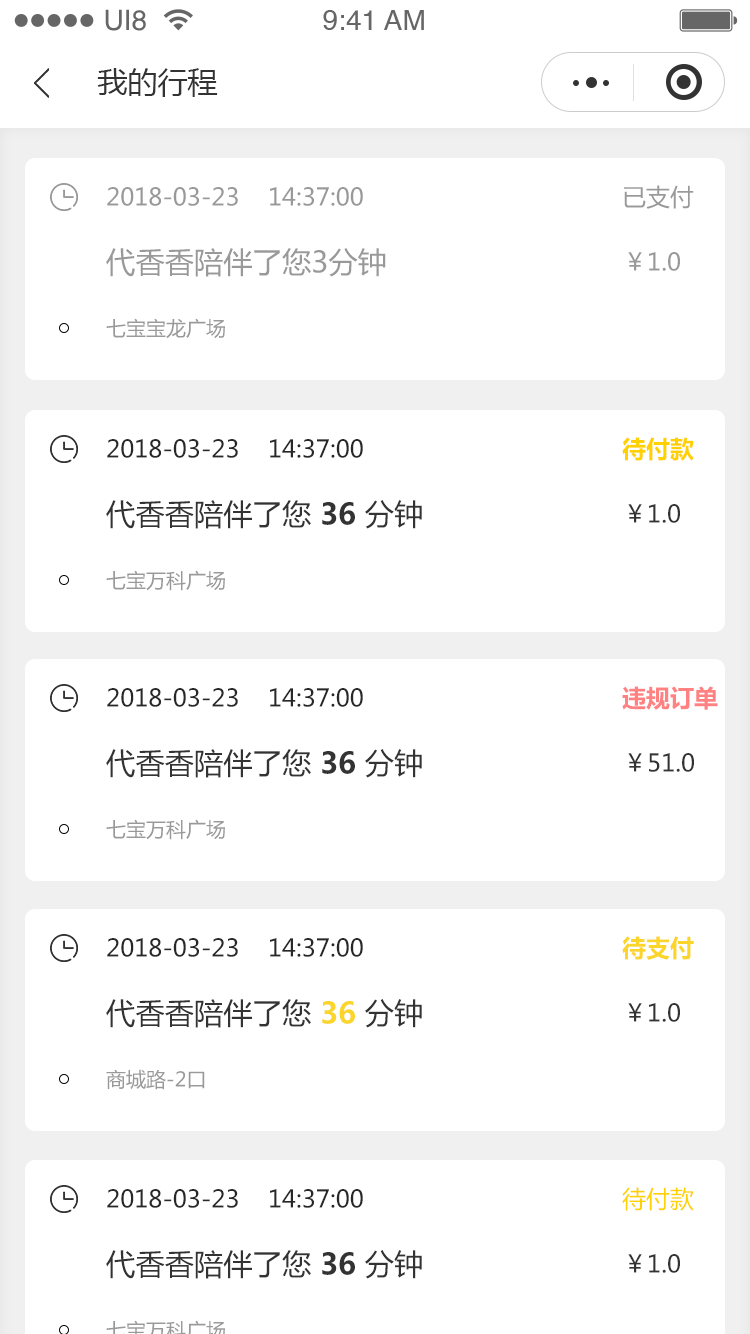
<style>
.page{position:relative;width:750px;height:1334px;background:#ffffff}
.page>*{position:absolute;margin:0}
.t1{font:28.1px "Helvetica";color:#666666}
.t2{font:30px "MicrosoftYaHei";color:#333333}
.t3{font:24px "MicrosoftYaHei";color:#999999}
.t4{font:29.3px "MicrosoftYaHei";color:#999999}
.t5{font:20px "MicrosoftYaHei";color:#999999}
.t6{font:24px "MicrosoftYaHei-Bold";color:#ffd100}
.t7{font:24px "MicrosoftYaHei";color:#282828}
.t8{font:29.3px "MicrosoftYaHei";color:#333333}
.t9{font:29.3px "MicrosoftYaHei-Bold";color:#333333}
.t10{font:24px "MicrosoftYaHei";color:#333333}
.t11{font:24px "MicrosoftYaHei-Bold";color:#ff8181}
.t12{font:24px "MicrosoftYaHei-Bold";color:#fbd52a}
.t13{font:29.3px "MicrosoftYaHei-Bold";color:#fbd52a}
.t14{font:24px "MicrosoftYaHei";color:#ffd100}
</style>
<div class="page">
<p class="t1" style="left:105px;top:9px;width:41px;height:22px">UI8</p>
<p class="t1" style="left:323px;top:10px;width:101px;height:20px">9:41 AM</p>
<p class="t2" style="left:97px;top:68px;width:121px;height:29px">我的行程</p>
<p class="t3" style="left:624px;top:185px;width:70px;height:24px">已支付</p>
<p class="t3" style="left:107px;top:187px;width:256px;height:19px">2018-03-23    14:37:00</p>
<p class="t4" style="left:106px;top:248px;width:280px;height:29px">代香香陪伴了您3分钟</p>
<p class="t3" style="left:628px;top:252px;width:52px;height:19px">￥1.0</p>
<p class="t5" style="left:106px;top:318px;width:119px;height:21px">七宝宝龙广场</p>
<p class="t6" style="left:622px;top:437px;width:72px;height:24px">待付款</p>
<p class="t7" style="left:107px;top:439px;width:256px;height:19px">2018-03-23    14:37:00</p>
<p class="t8" style="left:106px;top:500px;width:316px;height:29px">代香香陪伴了您 <span class="t9">36 </span>分钟</p>
<p class="t10" style="left:628px;top:504px;width:52px;height:19px">￥1.0</p>
<p class="t5" style="left:106px;top:570px;width:119px;height:21px">七宝万科广场</p>
<p class="t7" style="left:107px;top:688px;width:256px;height:19px">2018-03-23    14:37:00</p>
<p class="t11" style="left:622px;top:686px;width:96px;height:24px">违规订单</p>
<p class="t8" style="left:106px;top:749px;width:316px;height:29px">代香香陪伴了您 <span class="t9">36 </span>分钟</p>
<p class="t10" style="left:628px;top:753px;width:66px;height:19px">￥51.0</p>
<p class="t5" style="left:106px;top:819px;width:119px;height:21px">七宝万科广场</p>
<p class="t7" style="left:107px;top:938px;width:256px;height:19px">2018-03-23    14:37:00</p>
<p class="t12" style="left:622px;top:936px;width:72px;height:24px">待支付</p>
<p class="t8" style="left:106px;top:999px;width:316px;height:29px">代香香陪伴了您 <span class="t13">36 </span>分钟</p>
<p class="t10" style="left:628px;top:1003px;width:52px;height:19px">￥1.0</p>
<p class="t5" style="left:106px;top:1069px;width:99px;height:21px">商城路-2口</p>
<p class="t7" style="left:107px;top:1189px;width:256px;height:19px">2018-03-23    14:37:00</p>
<p class="t14" style="left:622px;top:1187px;width:72px;height:24px">待付款</p>
<p class="t8" style="left:106px;top:1250px;width:316px;height:29px">代香香陪伴了您 <span class="t9">36 </span>分钟</p>
<p class="t10" style="left:628px;top:1254px;width:52px;height:19px">￥1.0</p>
</div>
